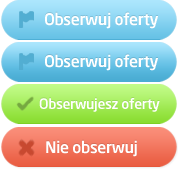
<style>
.page{position:relative;width:178px;height:169px}
.page>*{position:absolute;margin:0}
.t1{font:16px "NeoSans-Medium";letter-spacing:-0.025em;color:#ffffff}
.t2{font:14px "NeoSans-Medium";letter-spacing:-0.025em;color:#ffffff}
</style>
<div class="page">
<p class="t1" style="left:45px;top:12px;width:113px;height:17px">Obserwuj oferty</p>
<p class="t1" style="left:45px;top:54px;width:113px;height:17px">Obserwuj oferty</p>
<p class="t2" style="left:39px;top:98px;width:121px;height:14px">Obserwujesz oferty</p>
<p class="t1" style="left:46px;top:140px;width:91px;height:17px">Nie obserwuj</p>
</div>
